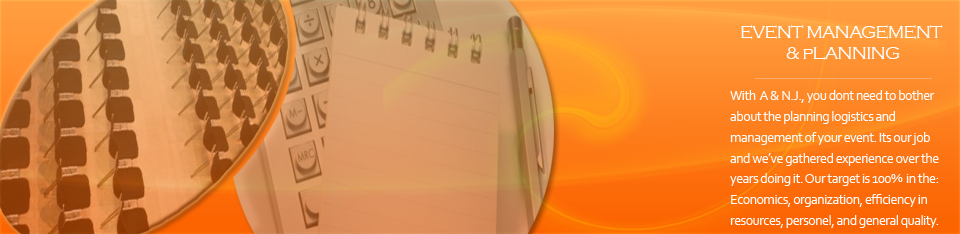
<style>
.page{position:relative;width:960px;height:234px}
.page>*{position:absolute;margin:0}
.t1{font:18px/6.9px "CopperplateGothic-Light";letter-spacing:-0.04em;color:#fcfbfa}
.t2{font:14px/6.9px "Corbel";letter-spacing:-0.04em;color:#fcfbfa}
</style>
<div class="page">
<p class="t1" style="left:741px;top:25px;width:202px;height:35px;text-align:center">EVENT MANAGEMENT <br><br><br>&amp; pLANNING</p>
<p class="t2" style="left:730px;top:90px;width:209px;height:138px">With  A &amp; N.J., you dont need to bother <br><br><br>about the planning logistics and<br><br><br>management of your event. Its our job<br><br><br>and we’ve gathered experience over the <br><br><br>years doing it. Our target is 100%  in the:<br><br><br>Economics, organization, efficiency in<br><br><br>resources, personel, and general quality.</p>
</div>
